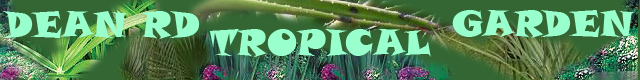
<style>
.page{position:relative;width:640px;height:80px}
.page>*{position:absolute;margin:0}
.t1{font:36px "SnapITC-Regular";color:#99ffcc}
</style>
<div class="page">
<p class="t1" style="left:3px;top:11px;width:197px;height:28px">DEAN RD</p>
<p class="t1" style="left:452px;top:10px;width:183px;height:28px">GARDEN</p>
<p class="t1" style="left:209px;top:29px;width:222px;height:28px">TROPICAL</p>
</div>
